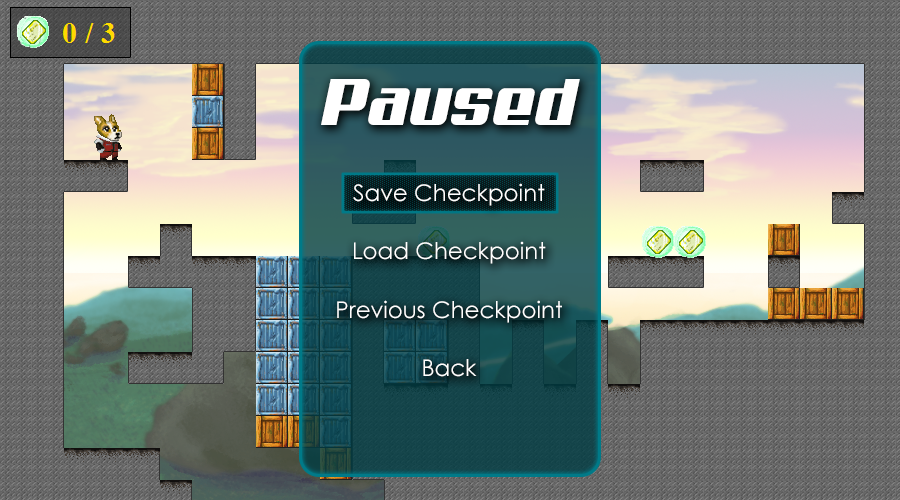
<style>
.page{position:relative;width:900px;height:500px}
.page>*{position:absolute;margin:0}
.t1{font:66.7px "Aero";color:#ffffff}
.t2{font:22.9px/58.3px "CenturyGothic";color:#ffffff}
</style>
<div class="page">
<p class="t1" style="left:321px;top:79px;width:259px;height:46px">Paused</p>
<p class="t2" style="left:337px;top:183px;width:225px;height:194px;text-align:center">Save Checkpoint<br>Load Checkpoint<br>Previous Checkpoint<br>Back</p>
</div>
